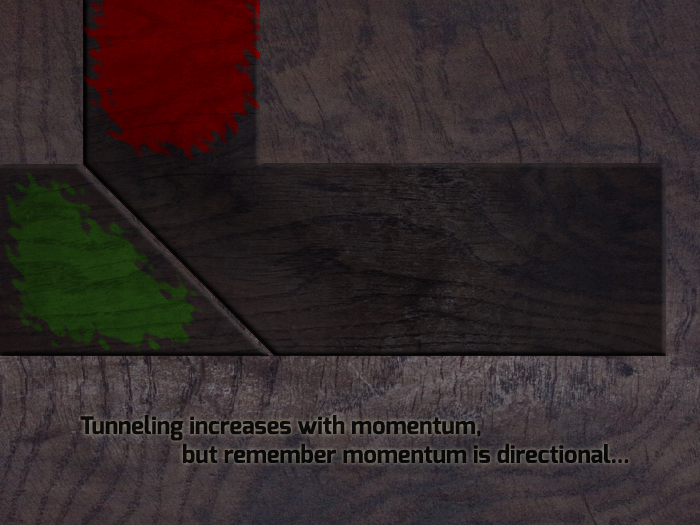
<style>
.page{position:relative;width:700px;height:525px}
.page>*{position:absolute;margin:0}
.t1{font:24px "Exo-Bold";color:#000000}
</style>
<div class="page">
<p class="t1" style="left:80px;top:415px;width:549px;height:49px;opacity:0.83">Tunneling increases with momentum,<br>                 but remember momentum is directional...</p>
</div>
